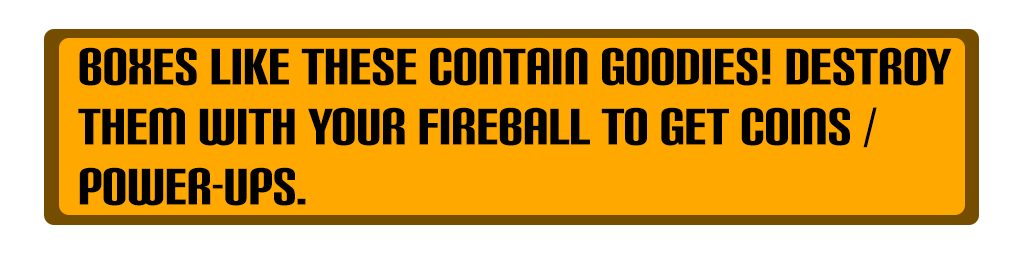
<style>
.page{position:relative;width:1024px;height:256px;background:#ffa800}
.page>*{position:absolute;margin:0}
.t1{font:50px "CarbonBl-Regular";color:#000000}
</style>
<div class="page">
<p class="t1" style="left:78px;top:47px;width:874px;height:159px">Boxes like these contain goodies! Destroy them with your fireball to get coins / power-ups.</p>
</div>
